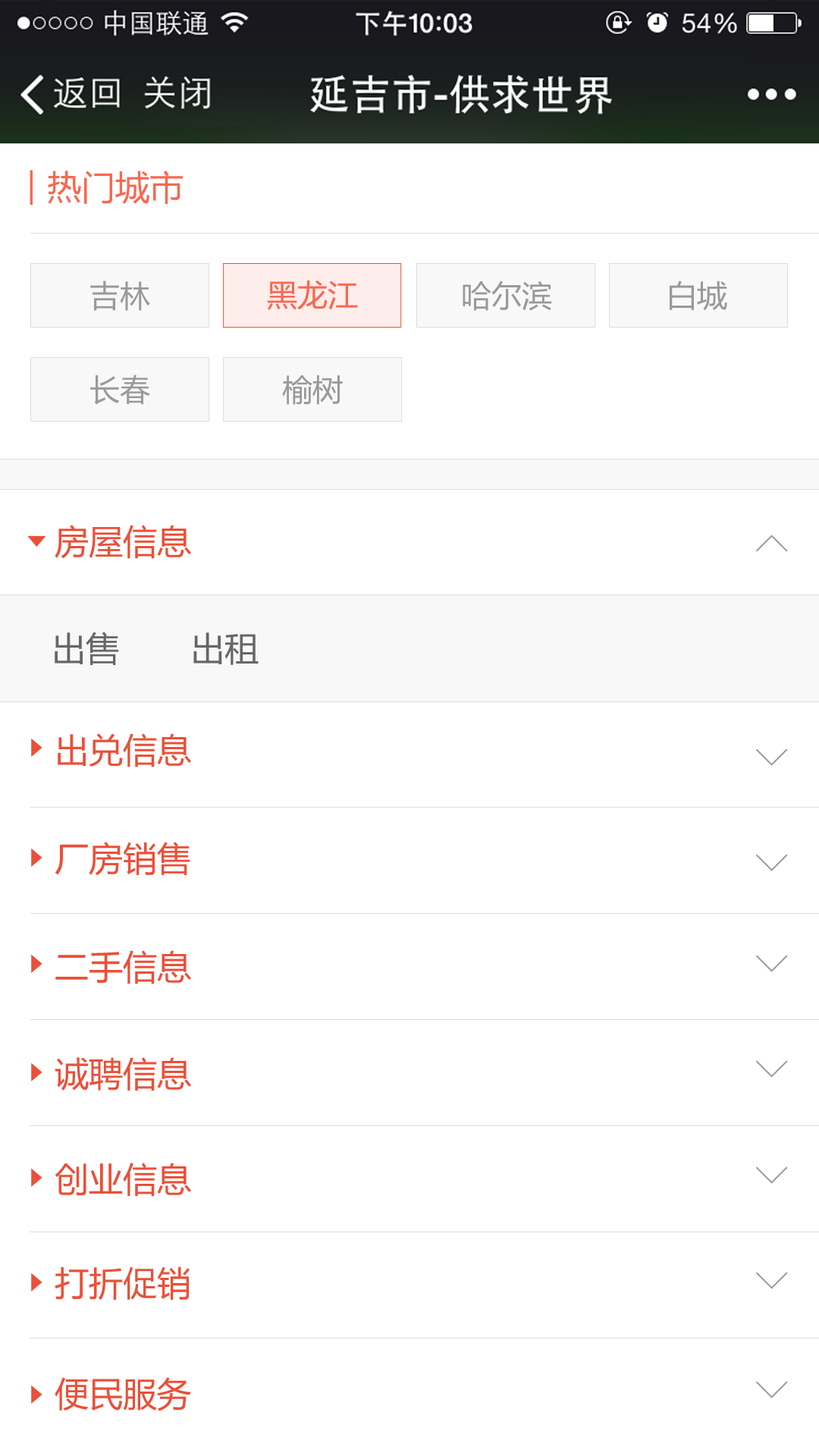
<style>
.page{position:relative;width:819px;height:1456px;background:#ffffff}
.page>*{position:absolute;margin:0}
.t1{font:34.1px "MicrosoftYaHei";color:#f96751}
.t2{font:30.3px "MicrosoftYaHei";color:#999999}
.t3{font:30.3px "MicrosoftYaHei";color:#f96751}
.t4{font:34.1px "MicrosoftYaHei";color:#eb4f38}
.t5{font:45.5px "NSimSun";color:#999999}
.t6{font:34.1px "MicrosoftYaHei";color:#666666}
.t7{font:34.1px/108.4px "MicrosoftYaHei";color:#eb4f38}
.t8{font:34.1px/102.4px "MicrosoftYaHei";color:#eb4f38}
.t9{font:34.1px/101.6px "MicrosoftYaHei";color:#eb4f38}
.t10{font:34.1px/106.9px "MicrosoftYaHei";color:#eb4f38}
.t11{font:34.1px/105.4px "MicrosoftYaHei";color:#eb4f38}
.t12{font:34.1px/103.9px "MicrosoftYaHei";color:#eb4f38}
.t13{font:34.1px/110.7px "MicrosoftYaHei";color:#eb4f38}
</style>
<div class="page">
<p class="t1" style="left:48px;top:171px;width:135px;height:33px">热门城市</p>
<p class="t2" style="left:90px;top:281px;width:60px;height:30px">吉林</p>
<p class="t3" style="left:267px;top:280px;width:91px;height:30px">黑龙江</p>
<p class="t2" style="left:463px;top:281px;width:89px;height:30px">哈尔滨</p>
<p class="t2" style="left:670px;top:281px;width:57px;height:30px">白城</p>
<p class="t2" style="left:90px;top:375px;width:60px;height:30px">长春</p>
<p class="t2" style="left:282px;top:375px;width:61px;height:30px">榆树</p>
<p class="t4" style="left:55px;top:525px;width:136px;height:34px">房屋信息</p>
<p class="t5" style="left:755px;top:535px;width:33px;height:17px;rotate:-90deg">&gt;</p>
<p class="t6" style="left:55px;top:632px;width:204px;height:33px">出售       出租</p>
<p class="t7" style="left:55px;top:733px;width:136px;height:678px"><span class="t8"><br></span><span class="t9">出兑信息<br></span>厂房销售<br>二手信息<br><span class="t10">诚聘信息<br></span><span class="t11">创业信息<br></span><span class="t12">打折促销<br></span><span class="t13">便民服务</span></p>
<p class="t5" style="left:755px;top:748px;width:33px;height:18px;rotate:90deg">&gt;</p>
<p class="t5" style="left:755px;top:854px;width:33px;height:17px;rotate:90deg">&gt;</p>
<p class="t5" style="left:755px;top:955px;width:33px;height:17px;rotate:90deg">&gt;</p>
<p class="t5" style="left:755px;top:1060px;width:33px;height:18px;rotate:90deg">&gt;</p>
<p class="t5" style="left:755px;top:1166px;width:33px;height:18px;rotate:90deg">&gt;</p>
<p class="t5" style="left:755px;top:1272px;width:33px;height:17px;rotate:90deg">&gt;</p>
<p class="t5" style="left:755px;top:1381px;width:33px;height:17px;rotate:90deg">&gt;</p>
</div>
